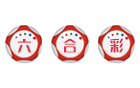
<style>
.page{position:relative;width:140px;height:88px;background:#ffffff}
.page>*{position:absolute;margin:0}
.t1{font:14.9px "REEJI-Sun-BoldGBV1.0";letter-spacing:-0.08em;color:#db334a}
</style>
<div class="page">
<p class="t1" style="left:17px;top:39px;width:15px;height:14px">六</p>
<p class="t1" style="left:63px;top:39px;width:14px;height:14px">合</p>
<p class="t1" style="left:110px;top:38px;width:14px;height:15px">彩</p>
</div>
